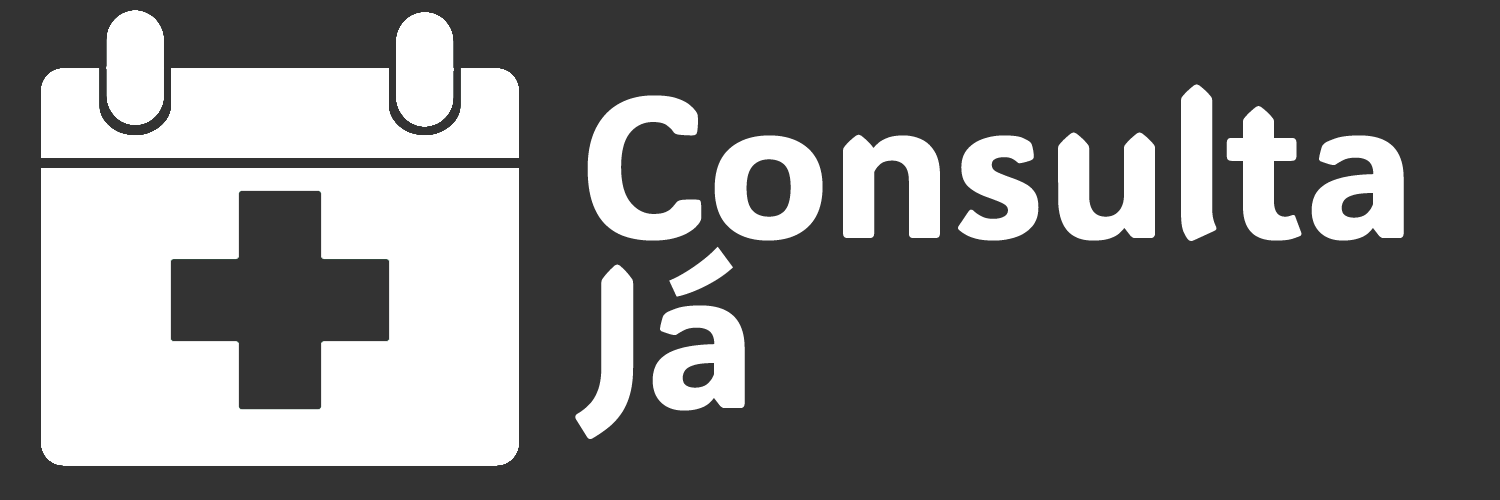
<style>
.page{position:relative;width:1500px;height:500px;background:#333333}
.page>*{position:absolute;margin:0}
.t1{font:200px/170px "ADLaMDisplay-Regular";color:#ffffff}
</style>
<div class="page">
<p class="t1" style="left:575px;top:84px;width:829px;height:355px">Consulta<br>Já</p>
</div>
